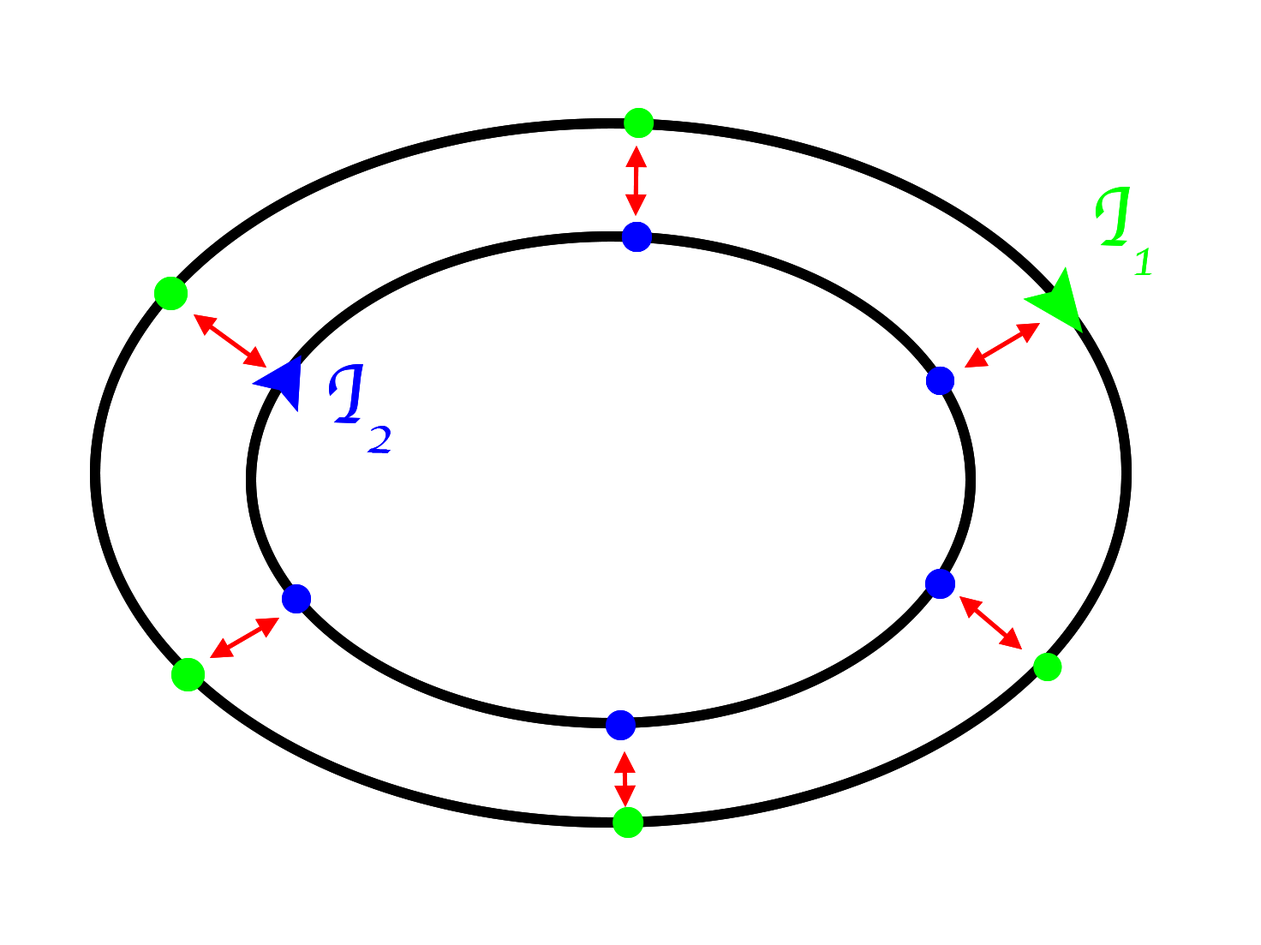
<style>
.page{position:relative;width:1261px;height:945px;background:#ffffff}
.page>*{position:absolute;margin:0}
.t1{font:89.3px "Apple-Chancery";color:#00ff00}
.t2{font:89.3px "Apple-Chancery";color:#0000ff}
</style>
<div class="page">
<p class="t1" style="left:1096px;top:187px;width:57px;height:88px">I1</p>
<p class="t2" style="left:329px;top:364px;width:62px;height:89px">I2</p>
</div>
